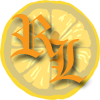
<style>
.page{position:relative;width:100px;height:100px}
.page>*{position:absolute;margin:0}
.t1{font:60px "OldEnglishTextMT";color:#f8981c}
</style>
<div class="page">
<p class="t1" style="left:10px;top:14px;width:49px;height:44px">R</p>
<p class="t1" style="left:45px;top:39px;width:42px;height:44px">L</p>
</div>
